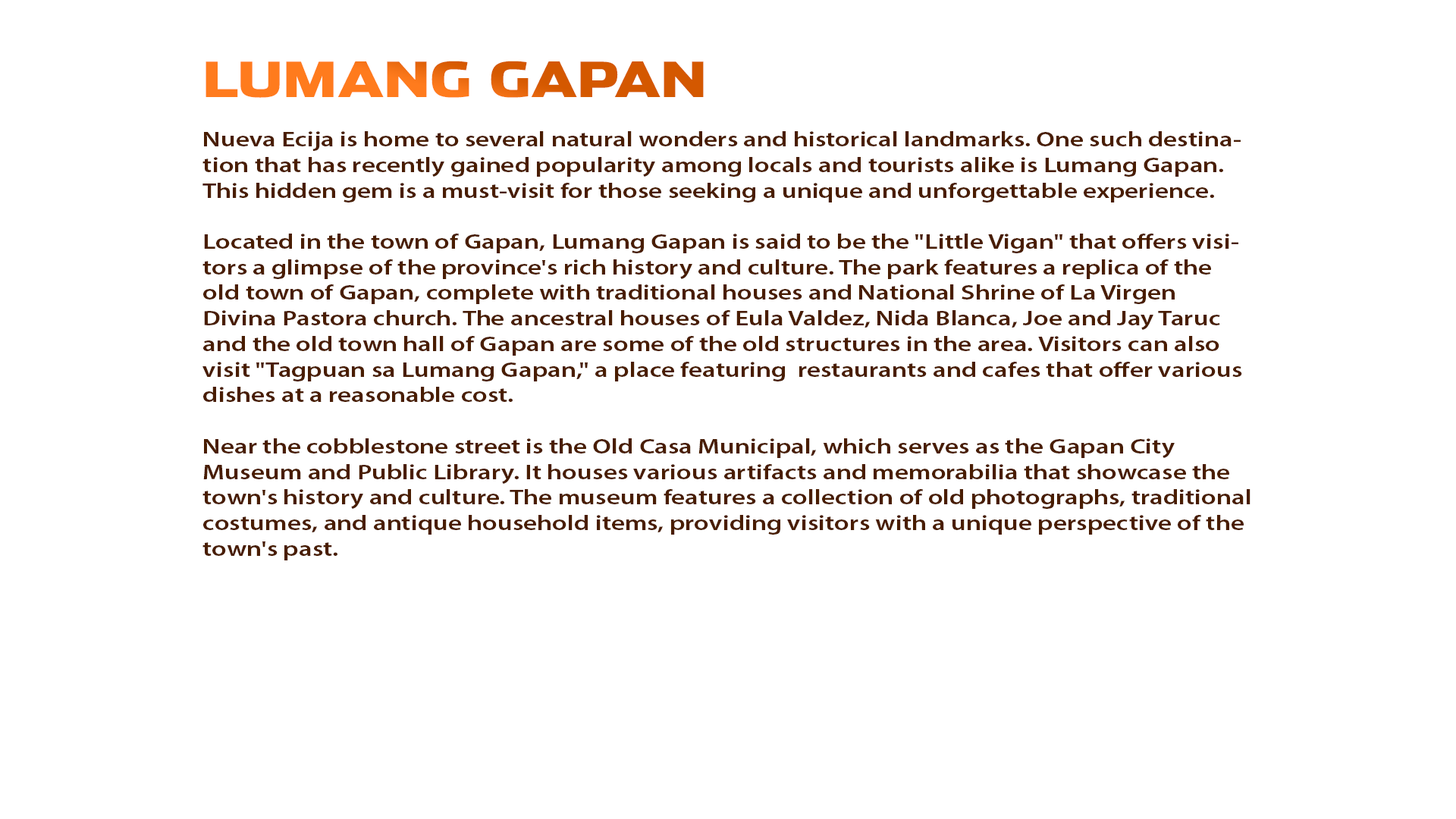
<style>
.page{position:relative;width:1456px;height:819px;background:#ffffff}
.page>*{position:absolute;margin:0}
.t1{font:48.2px "Stainless-Black";scale:1.24 1}
.t2{font:21.3px "MyriadPro-Semibold";color:#491d00;scale:1.24 1}
</style>
<div class="page">
<p class="t1" style="left:206px;top:61px;width:498px;height:37px">LUMANG GAPAN</p>
<p class="t2" style="left:202px;top:131px;width:1048px;height:429px">Nueva Ecija is home to several natural wonders and historical landmarks. One such destination that has recently gained popularity among locals and tourists alike is Lumang Gapan. This hidden gem is a must-visit for those seeking a unique and unforgettable experience.<br><br>Located in the town of Gapan, Lumang Gapan is said to be the "Little Vigan" that offers visitors a glimpse of the province's rich history and culture. The park features a replica of the old town of Gapan, complete with traditional houses and National Shrine of La Virgen Divina Pastora church. The ancestral houses of Eula Valdez, Nida Blanca, Joe and Jay Taruc and the old town hall of Gapan are some of the old structures in the area. Visitors can also visit "Tagpuan sa Lumang Gapan," a place featuring  restaurants and cafes that offer various dishes at a reasonable cost.<br><br>Near the cobblestone street is the Old Casa Municipal, which serves as the Gapan City Museum and Public Library. It houses various artifacts and memorabilia that showcase the town's history and culture. The museum features a collection of old photographs, traditional costumes, and antique household items, providing visitors with a unique perspective of the town's past.</p>
</div>
